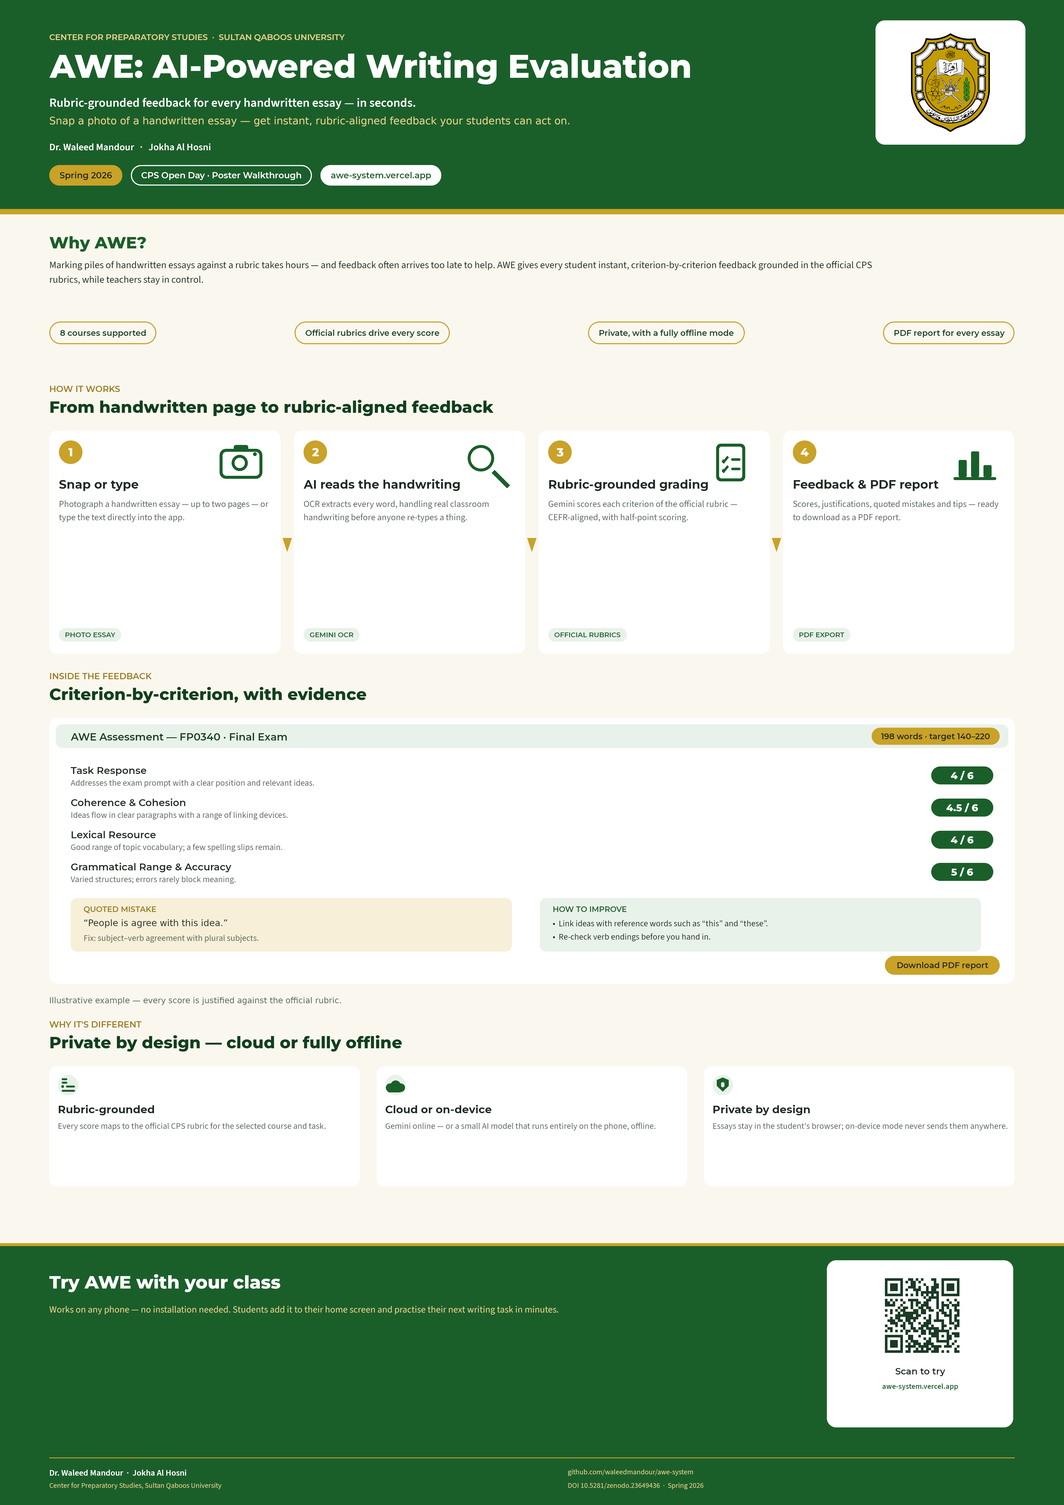
<style>
.page{position:relative;width:1064px;height:1505px;background:#ffffff}
.page>*{position:absolute;margin:0}
.t1{font:8.1px "Montserrat-SemiBold";color:#e8d48b}
.t2{font:32.6px "Montserrat-ExtraBold";color:#ffffff}
.t3{font:12.4px "SourceSans3-Semibold";color:#ffffff}
.t4{font:10.3px "SourceSans3-It";color:#e8d48b}
.t5{font:9.9px "SourceSans3-Semibold";color:#ffffff}
.t6{font:8.6px "Montserrat-SemiBold";color:#1f2a22}
.t7{font:8.6px "Montserrat-SemiBold";color:#ffffff}
.t8{font:8.6px "Montserrat-SemiBold";color:#1a5f2a}
.t9{font:16.3px "Montserrat-ExtraBold";color:#1a5f2a}
.t10{font:9.9px "SourceSans3-Regular";color:#1f2a22}
.t11{font:8.1px "Montserrat-SemiBold";color:#10401e}
.t12{font:8.6px "Montserrat-SemiBold";color:#9a7a1a}
.t13{font:16.3px "Montserrat-ExtraBold";color:#10401e}
.t14{font:11.6px "Montserrat-ExtraBold";color:#ffffff}
.t15{font:12px "Montserrat-Bold";color:#1f2a22}
.t16{font:9px "SourceSans3-Regular";color:#566558}
.t17{font:6.9px "Montserrat-SemiBold";color:#1a5f2a}
.t18{font:10.3px "Montserrat-SemiBold";color:#10401e}
.t19{font:8.1px "Montserrat-SemiBold";color:#1f2a22}
.t20{font:9.9px "Montserrat-SemiBold";color:#1f2a22}
.t21{font:9.9px "Montserrat-ExtraBold";color:#ffffff}
.t22{font:8.6px "SourceSans3-Regular";color:#566558}
.t23{font:7.7px "Montserrat-SemiBold";color:#9a7a1a}
.t24{font:7.7px "Montserrat-SemiBold";color:#1a5f2a}
.t25{font:9px "SourceSans3-It";color:#1f2a22}
.t26{font:8.6px "SourceSans3-Regular";color:#1f2a22}
.t27{font:8.1px "SourceSans3-It";color:#566558}
.t28{font:10.7px "Montserrat-Bold";color:#1f2a22}
.t29{font:18px "Montserrat-ExtraBold";color:#ffffff}
.t30{font:9.4px "SourceSans3-Regular";color:#e8d48b}
.t31{font:9px "Montserrat-SemiBold";color:#1f2a22}
.t32{font:7.7px "SourceSans3-Semibold";color:#1a5f2a}
.t33{font:8.6px "SourceSans3-Semibold";color:#ffffff}
.t34{font:7.3px "SourceSans3-Regular";color:#e8d48b}
</style>
<div class="page">
<p class="t1" style="left:49px;top:32px;width:296px;height:10px">CENTER FOR PREPARATORY STUDIES  ·  SULTAN QABOOS UNIVERSITY</p>
<p class="t2" style="left:49px;top:46px;width:643px;height:40px">AWE: AI-Powered Writing Evaluation</p>
<p class="t3" style="left:49px;top:94px;width:367px;height:17px">Rubric-grounded feedback for every handwritten essay — in seconds.</p>
<p class="t4" style="left:49px;top:115px;width:521px;height:12px">Snap a photo of a handwritten essay — get instant, rubric-aligned feedback your students can act on.</p>
<p class="t5" style="left:49px;top:140px;width:162px;height:13px">Dr. Waleed Mandour   ·   Jokha Al Hosni</p>
<p class="t6" style="left:60px;top:170px;width:52px;height:11px">Spring 2026</p>
<p class="t7" style="left:141px;top:170px;width:161px;height:11px">CPS Open Day · Poster Walkthrough</p>
<p class="t8" style="left:331px;top:170px;width:100px;height:11px">awe-system.vercel.app</p>
<p class="t9" style="left:49px;top:232px;width:98px;height:21px">Why AWE?</p>
<p class="t10" style="left:49px;top:258px;width:824px;height:13px">Marking piles of handwritten essays against a rubric takes hours — and feedback often arrives too late to help. AWE gives every student instant, criterion-by-criterion feedback grounded in the official CPS</p>
<p class="t10" style="left:49px;top:273px;width:155px;height:13px">rubrics, while teachers stay in control.</p>
<p class="t11" style="left:60px;top:328px;width:86px;height:10px">8 courses supported</p>
<p class="t11" style="left:305px;top:328px;width:135px;height:10px">Official rubrics drive every score</p>
<p class="t11" style="left:599px;top:328px;width:135px;height:10px">Private, with a fully offline mode</p>
<p class="t11" style="left:894px;top:328px;width:111px;height:10px">PDF report for every essay</p>
<p class="t12" style="left:49px;top:384px;width:71px;height:10px">HOW IT WORKS</p>
<p class="t13" style="left:49px;top:397px;width:445px;height:20px">From handwritten page to rubric-aligned feedback</p>
<p class="t14" style="left:68px;top:445px;width:5px;height:14px">1</p>
<p class="t14" style="left:312px;top:445px;width:7px;height:14px">2</p>
<p class="t14" style="left:557px;top:445px;width:7px;height:14px">3</p>
<p class="t14" style="left:801px;top:445px;width:8px;height:14px">4</p>
<p class="t15" style="left:59px;top:477px;width:80px;height:15px">Snap or type</p>
<p class="t15" style="left:304px;top:477px;width:157px;height:15px">AI reads the handwriting</p>
<p class="t15" style="left:548px;top:477px;width:161px;height:15px">Rubric-grounded grading</p>
<p class="t15" style="left:793px;top:477px;width:146px;height:15px">Feedback &amp; PDF report</p>
<p class="t16" style="left:59px;top:498px;width:209px;height:12px">Photograph a handwritten essay — up to two pages — or</p>
<p class="t16" style="left:304px;top:498px;width:185px;height:12px">OCR extracts every word, handling real classroom</p>
<p class="t16" style="left:548px;top:498px;width:190px;height:12px">Gemini scores each criterion of the official rubric —</p>
<p class="t16" style="left:793px;top:498px;width:206px;height:12px">Scores, justifications, quoted mistakes and tips — ready</p>
<p class="t16" style="left:59px;top:511px;width:126px;height:12px">type the text directly into the app.</p>
<p class="t16" style="left:304px;top:511px;width:164px;height:12px">handwriting before anyone re-types a thing.</p>
<p class="t16" style="left:548px;top:511px;width:140px;height:12px">CEFR-aligned, with half-point scoring.</p>
<p class="t16" style="left:793px;top:511px;width:108px;height:12px">to download as a PDF report.</p>
<p class="t17" style="left:65px;top:630px;width:51px;height:9px">PHOTO ESSAY</p>
<p class="t17" style="left:310px;top:630px;width:44px;height:9px">GEMINI OCR</p>
<p class="t17" style="left:554px;top:630px;width:67px;height:9px">OFFICIAL RUBRICS</p>
<p class="t17" style="left:799px;top:630px;width:46px;height:9px">PDF EXPORT</p>
<p class="t12" style="left:49px;top:671px;width:103px;height:10px">INSIDE THE FEEDBACK</p>
<p class="t13" style="left:49px;top:684px;width:318px;height:20px">Criterion-by-criterion, with evidence</p>
<p class="t18" style="left:71px;top:730px;width:217px;height:13px">AWE Assessment — FP0340 · Final Exam</p>
<p class="t19" style="left:881px;top:731px;width:109px;height:10px">198 words · target 140–220</p>
<p class="t20" style="left:71px;top:764px;width:76px;height:12px">Task Response</p>
<p class="t21" style="left:951px;top:769px;width:23px;height:13px">4 / 6</p>
<p class="t22" style="left:71px;top:777px;width:244px;height:12px">Addresses the exam prompt with a clear position and relevant ideas.</p>
<p class="t20" style="left:71px;top:796px;width:115px;height:12px">Coherence &amp; Cohesion</p>
<p class="t22" style="left:71px;top:809px;width:217px;height:12px">Ideas flow in clear paragraphs with a range of linking devices.</p>
<p class="t21" style="left:946px;top:801px;width:32px;height:13px">4.5 / 6</p>
<p class="t20" style="left:71px;top:828px;width:85px;height:13px">Lexical Resource</p>
<p class="t21" style="left:951px;top:834px;width:23px;height:12px">4 / 6</p>
<p class="t22" style="left:71px;top:841px;width:212px;height:12px">Good range of topic vocabulary; a few spelling slips remain.</p>
<p class="t20" style="left:71px;top:861px;width:160px;height:12px">Grammatical Range &amp; Accuracy</p>
<p class="t21" style="left:951px;top:866px;width:23px;height:12px">5 / 6</p>
<p class="t22" style="left:71px;top:873px;width:165px;height:12px">Varied structures; errors rarely block meaning.</p>
<p class="t23" style="left:84px;top:904px;width:72px;height:10px">QUOTED MISTAKE</p>
<p class="t24" style="left:553px;top:904px;width:74px;height:10px">HOW TO IMPROVE</p>
<p class="t25" style="left:84px;top:918px;width:144px;height:10px">“People is agree with this idea.”</p>
<p class="t26" style="left:553px;top:918px;width:215px;height:11px">•  Link ideas with reference words such as “this” and “these”.</p>
<p class="t22" style="left:84px;top:932px;width:175px;height:12px">Fix: subject–verb agreement with plural subjects.</p>
<p class="t26" style="left:553px;top:931px;width:158px;height:11px">•  Re-check verb endings before you hand in.</p>
<p class="t19" style="left:897px;top:960px;width:92px;height:10px">Download PDF report</p>
<p class="t27" style="left:49px;top:995px;width:293px;height:10px">Illustrative example — every score is justified against the official rubric.</p>
<p class="t12" style="left:49px;top:1019px;width:92px;height:11px">WHY IT'S DIFFERENT</p>
<p class="t13" style="left:49px;top:1032px;width:353px;height:20px">Private by design — cloud or fully offline</p>
<p class="t28" style="left:58px;top:1102px;width:97px;height:14px">Rubric-grounded</p>
<p class="t28" style="left:385px;top:1102px;width:107px;height:14px">Cloud or on-device</p>
<p class="t28" style="left:713px;top:1102px;width:98px;height:14px">Private by design</p>
<p class="t22" style="left:58px;top:1120px;width:268px;height:12px">Every score maps to the official CPS rubric for the selected course and task.</p>
<p class="t22" style="left:385px;top:1120px;width:271px;height:12px">Gemini online — or a small AI model that runs entirely on the phone, offline.</p>
<p class="t22" style="left:713px;top:1120px;width:295px;height:12px">Essays stay in the student's browser; on-device mode never sends them anywhere.</p>
<p class="t29" style="left:49px;top:1271px;width:232px;height:22px">Try AWE with your class</p>
<p class="t30" style="left:49px;top:1303px;width:510px;height:13px">Works on any phone — no installation needed. Students add it to their home screen and practise their next writing task in minutes.</p>
<p class="t31" style="left:896px;top:1365px;width:50px;height:12px">Scan to try</p>
<p class="t32" style="left:882px;top:1381px;width:76px;height:10px">awe-system.vercel.app</p>
<p class="t33" style="left:49px;top:1467px;width:138px;height:11px">Dr. Waleed Mandour  ·  Jokha Al Hosni</p>
<p class="t34" style="left:568px;top:1467px;width:126px;height:10px">github.com/waleedmandour/awe-system</p>
<p class="t34" style="left:49px;top:1480px;width:173px;height:10px">Center for Preparatory Studies, Sultan Qaboos University</p>
<p class="t34" style="left:568px;top:1480px;width:136px;height:10px">DOI 10.5281/zenodo.23649436  ·  Spring 2026</p>
</div>
